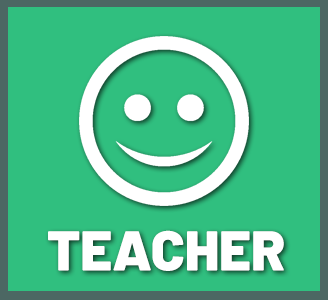
<style>
.page{position:relative;width:328px;height:300px;background:#30bf7f}
.page>*{position:absolute;margin:0}
.t1{font:56px "Barlow-Black";color:#ffffff}
</style>
<div class="page">
<p class="t1" style="left:48px;top:230px;width:236px;height:41px">TEACHER</p>
</div>
